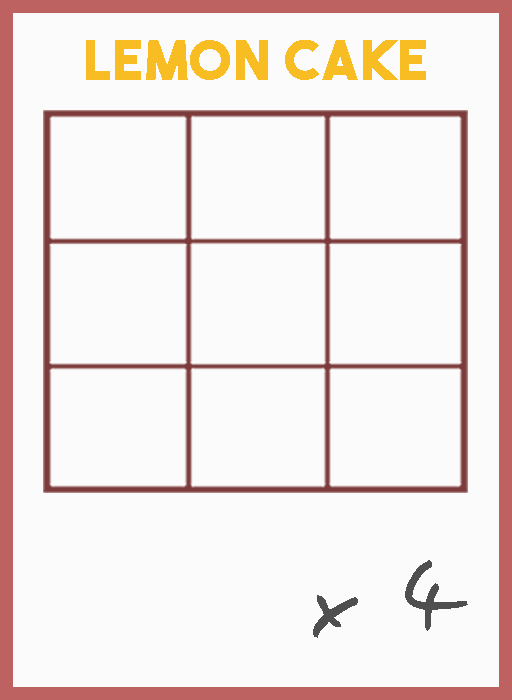
<style>
.page{position:relative;width:512px;height:700px;background:#fbfbfb}
.page>*{position:absolute;margin:0}
.t1{font:54.5px "TheBoldFont";letter-spacing:0.05em;color:#f7bd22}
.t2{font:106.1px "EasySpeech";letter-spacing:0.05em;color:#4f4f4f}
</style>
<div class="page">
<p class="t1" style="left:86px;top:40px;width:340px;height:40px">lemon cake</p>
<p class="t2" style="left:313px;top:560px;width:155px;height:78px">x 4</p>
</div>
